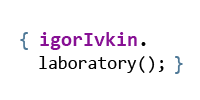
<style>
.page{position:relative;width:200px;height:100px;background:#ffffff}
.page>*{position:absolute;margin:0}
.t1{font:20px "Consolas";color:#4e7896}
.t2{font:20px "Consolas-Bold";color:#871094}
.t3{font:20px "Consolas-Bold";color:#000000}
.t4{font:18px "Consolas";color:#000000}
</style>
<div class="page">
<p class="t1" style="left:20px;top:32px;width:8px;height:18px">{</p>
<p class="t2" style="left:40px;top:32px;width:106px;height:18px">igorIvkin<span class="t3">.</span></p>
<p class="t4" style="left:39px;top:56px;width:125px;height:17px">laboratory();</p>
<p class="t1" style="left:175px;top:56px;width:8px;height:18px">}</p>
</div>
